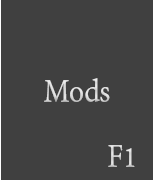
<style>
.page{position:relative;width:154px;height:180px;background:#404040}
.page>*{position:absolute;margin:0}
.t1{font:36px "AdobeDevanagari-Regular";color:#e6e6e6;scale:0.88 1}
</style>
<div class="page">
<p class="t1" style="left:44px;top:78px;width:66px;height:24px">Mods</p>
<p class="t1" style="left:108px;top:145px;width:27px;height:22px">F1</p>
</div>
